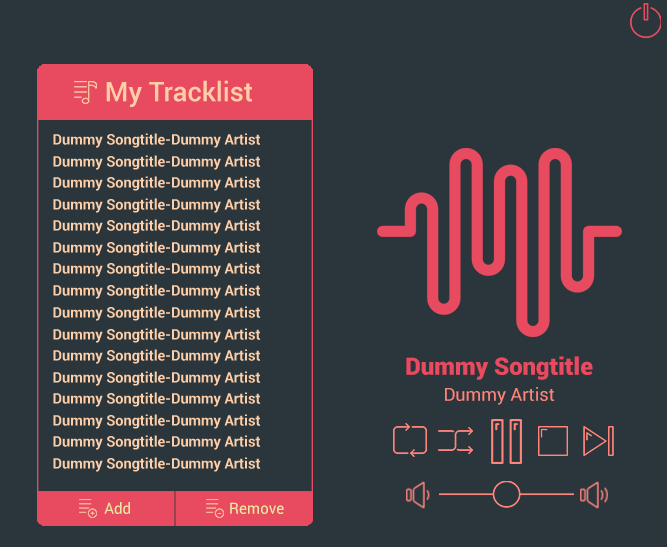
<style>
.page{position:relative;width:667px;height:547px;background:#2a363b}
.page>*{position:absolute;margin:0}
.t1{font:27px "Roboto-Medium";color:#fecea8}
.t2{font:14.5px "Roboto-Bold";color:#fecea8}
.t3{font:24px "Roboto-Black";color:#e84a5f}
.t4{font:18px "Roboto-Regular";color:#ff847c}
.t5{font:15.5px "Roboto-Regular";color:#e8eaa1}
</style>
<div class="page">
<p class="t1" style="left:106px;top:80px;width:147px;height:27px">My Tracklist</p>
<p class="t2" style="left:53px;top:133px;width:208px;height:15px">Dummy Songtitle-Dummy Artist</p>
<p class="t2" style="left:53px;top:155px;width:208px;height:15px">Dummy Songtitle-Dummy Artist</p>
<p class="t2" style="left:53px;top:176px;width:208px;height:15px">Dummy Songtitle-Dummy Artist</p>
<p class="t2" style="left:53px;top:198px;width:208px;height:15px">Dummy Songtitle-Dummy Artist</p>
<p class="t2" style="left:53px;top:219px;width:208px;height:15px">Dummy Songtitle-Dummy Artist</p>
<p class="t2" style="left:53px;top:241px;width:208px;height:15px">Dummy Songtitle-Dummy Artist</p>
<p class="t2" style="left:53px;top:262px;width:208px;height:15px">Dummy Songtitle-Dummy Artist</p>
<p class="t2" style="left:53px;top:284px;width:208px;height:15px">Dummy Songtitle-Dummy Artist</p>
<p class="t2" style="left:53px;top:306px;width:208px;height:15px">Dummy Songtitle-Dummy Artist</p>
<p class="t2" style="left:53px;top:328px;width:208px;height:15px">Dummy Songtitle-Dummy Artist</p>
<p class="t2" style="left:53px;top:349px;width:208px;height:15px">Dummy Songtitle-Dummy Artist</p>
<p class="t3" style="left:406px;top:356px;width:187px;height:24px">Dummy Songtitle</p>
<p class="t2" style="left:53px;top:371px;width:208px;height:15px">Dummy Songtitle-Dummy Artist</p>
<p class="t4" style="left:445px;top:387px;width:110px;height:18px">Dummy Artist</p>
<p class="t2" style="left:53px;top:392px;width:208px;height:15px">Dummy Songtitle-Dummy Artist</p>
<p class="t2" style="left:53px;top:414px;width:208px;height:15px">Dummy Songtitle-Dummy Artist</p>
<p class="t2" style="left:53px;top:435px;width:208px;height:15px">Dummy Songtitle-Dummy Artist</p>
<p class="t2" style="left:53px;top:457px;width:208px;height:15px">Dummy Songtitle-Dummy Artist</p>
<p class="t5" style="left:104px;top:502px;width:26px;height:12px">Add</p>
<p class="t5" style="left:230px;top:502px;width:54px;height:12px">Remove</p>
</div>
